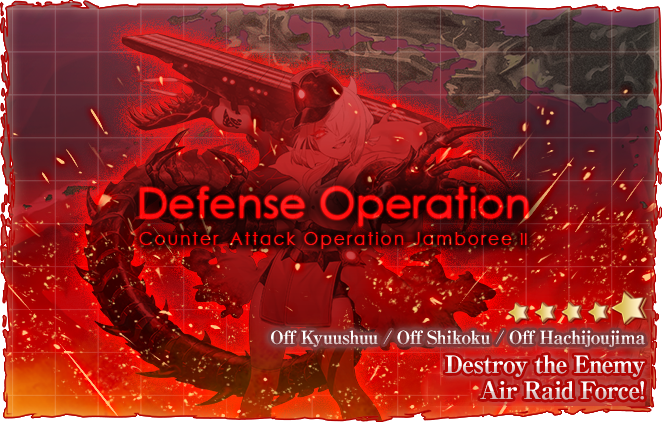
<style>
.page{position:relative;width:662px;height:422px}
.page>*{position:absolute;margin:0}
.t1{font:18px "RyuminPro-ExBold";letter-spacing:-0.04em}
.t2{font:24px "RyuminPro-ExBold";letter-spacing:-0.04em}
</style>
<div class="page">
<p class="t1" style="left:271px;top:330px;width:375px;height:17px">Off Kyuushuu / Off Shikoku / Off Hachijoujima</p>
<p class="t2" style="left:445px;top:355px;width:200px;height:22px">Destroy the Enemy</p>
<p class="t2" style="left:480px;top:381px;width:164px;height:19px">Air Raid Force!</p>
</div>
